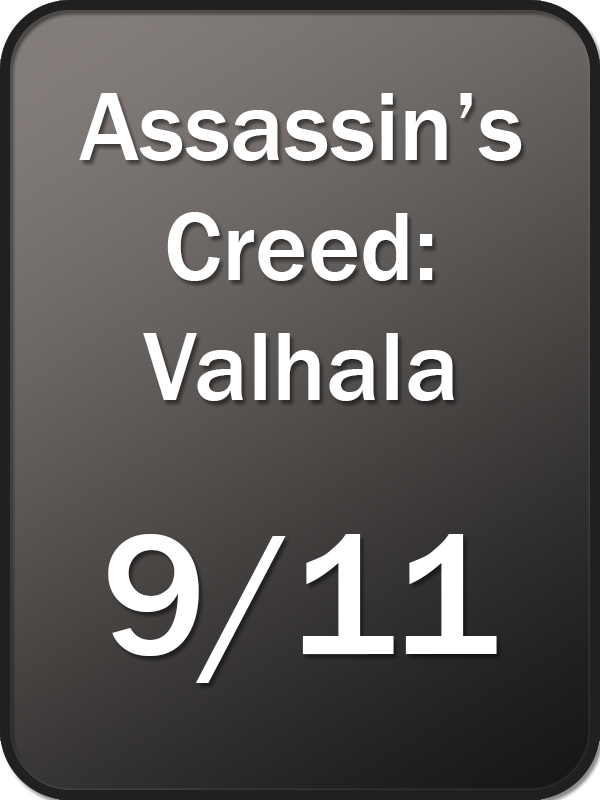
<style>
.page{position:relative;width:600px;height:800px}
.page>*{position:absolute;margin:0}
.t1{font:100px "FranklinGothic-Medium";color:#ffffff}
.t2{font:176.6px "FranklinGothic-Medium";color:#ffffff}
</style>
<div class="page">
<p class="t1" style="left:79px;top:93px;width:443px;height:308px;text-align:center">Assassin’s<br>Creed:<br>Valhala</p>
<p class="t2" style="left:108px;top:534px;width:389px;height:149px">9/11</p>
</div>
